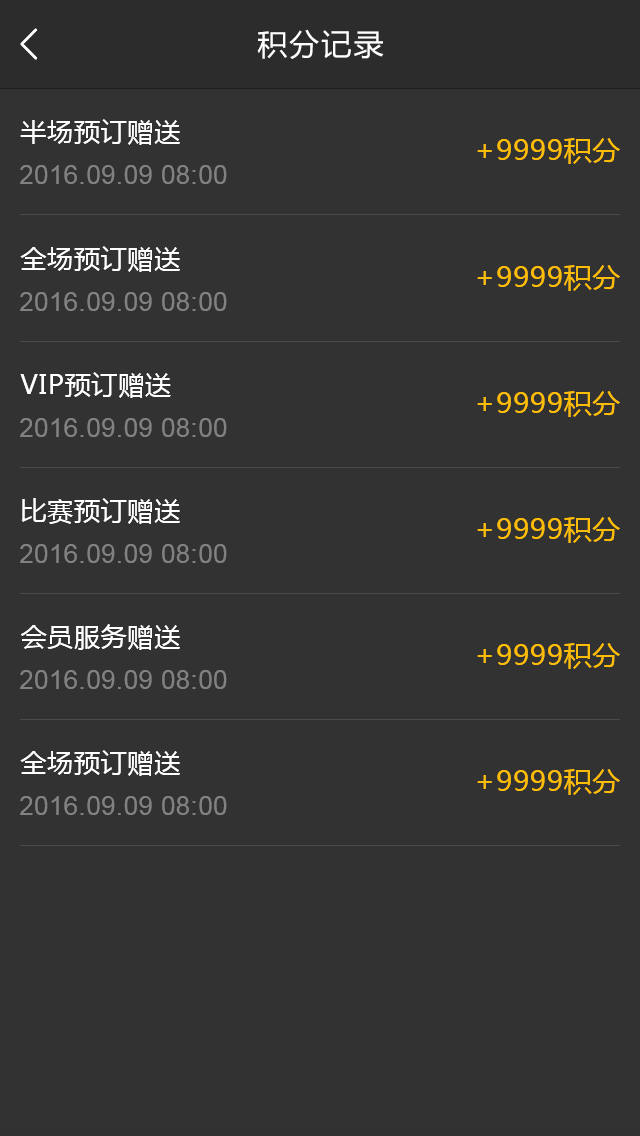
<style>
.page{position:relative;width:640px;height:1136px;background:#323232}
.page>*{position:absolute;margin:0}
.t1{font:30px "MicrosoftYaHei";letter-spacing:0.07em;color:#ffffff}
.t2{font:26px "MicrosoftYaHei";letter-spacing:0.03em;color:#ffffff}
.t3{font:28px "MicrosoftYaHei";letter-spacing:0.03em;color:#fdbd06}
.t4{font:26px "ArialMT";letter-spacing:0.03em;color:#818181}
</style>
<div class="page">
<p class="t1" style="left:257px;top:29px;width:127px;height:30px">积分记录</p>
<p class="t2" style="left:20px;top:119px;width:160px;height:26px">半场预订赠送</p>
<p class="t3" style="left:477px;top:138px;width:143px;height:26px">+9999积分</p>
<p class="t4" style="left:20px;top:165px;width:207px;height:19px">2016.09.09 08:00</p>
<p class="t2" style="left:20px;top:246px;width:160px;height:26px">全场预订赠送</p>
<p class="t3" style="left:477px;top:265px;width:143px;height:26px">+9999积分</p>
<p class="t4" style="left:20px;top:292px;width:207px;height:19px">2016.09.09 08:00</p>
<p class="t2" style="left:20px;top:372px;width:151px;height:26px">VIP预订赠送</p>
<p class="t3" style="left:477px;top:391px;width:143px;height:26px">+9999积分</p>
<p class="t4" style="left:20px;top:418px;width:207px;height:19px">2016.09.09 08:00</p>
<p class="t2" style="left:21px;top:498px;width:159px;height:26px">比赛预订赠送</p>
<p class="t3" style="left:477px;top:517px;width:143px;height:26px">+9999积分</p>
<p class="t4" style="left:20px;top:544px;width:207px;height:19px">2016.09.09 08:00</p>
<p class="t2" style="left:20px;top:624px;width:160px;height:26px">会员服务赠送</p>
<p class="t3" style="left:477px;top:643px;width:143px;height:26px">+9999积分</p>
<p class="t4" style="left:20px;top:670px;width:207px;height:19px">2016.09.09 08:00</p>
<p class="t2" style="left:20px;top:750px;width:160px;height:26px">全场预订赠送</p>
<p class="t3" style="left:477px;top:769px;width:143px;height:26px">+9999积分</p>
<p class="t4" style="left:20px;top:796px;width:207px;height:19px">2016.09.09 08:00</p>
</div>
